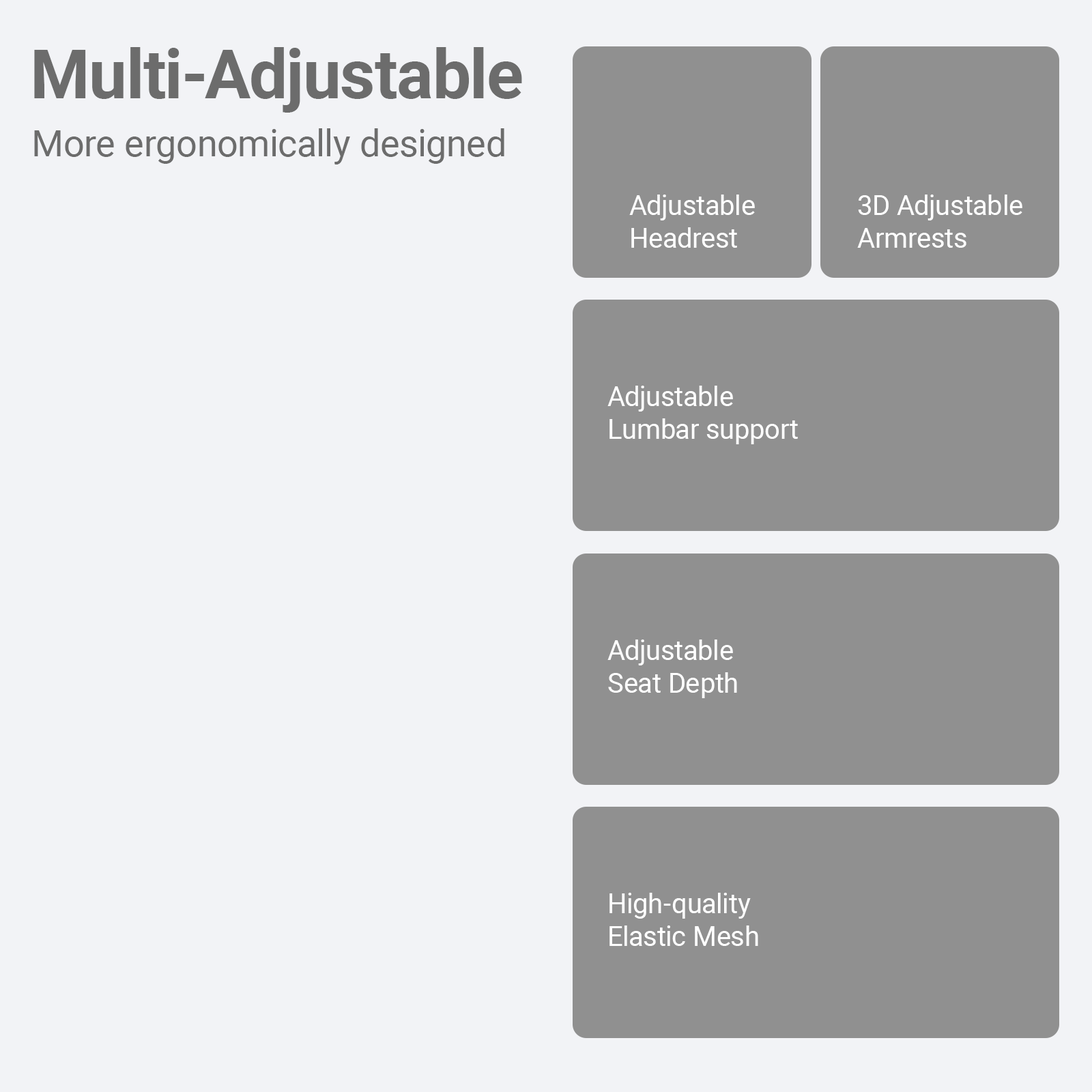
<style>
.page{position:relative;width:1092px;height:1092px;background:#f2f3f6}
.page>*{position:absolute;margin:0}
.t1{font:68.2px "Roboto-Bold";color:#6c6c6c}
.t2{font:37.1px "Roboto-Regular";color:#6c6c6c}
.t3{font:27.3px "Roboto-Regular";color:#ffffff}
</style>
<div class="page">
<p class="t1" style="left:34px;top:47px;width:488px;height:66px">Multi-Adjustable</p>
<p class="t2" style="left:34px;top:128px;width:470px;height:36px">More ergonomically designed</p>
<p class="t3" style="left:629px;top:195px;width:126px;height:53px">Adjustable<br>Headrest</p>
<p class="t3" style="left:857px;top:195px;width:165px;height:53px">3D Adjustable<br>Armrests</p>
<p class="t3" style="left:607px;top:386px;width:191px;height:58px">Adjustable<br>Lumbar support</p>
<p class="t3" style="left:607px;top:639px;width:130px;height:59px">Adjustable<br>Seat Depth</p>
<p class="t3" style="left:609px;top:893px;width:149px;height:53px">High-quality<br>Elastic Mesh</p>
</div>
